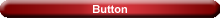
<style>
.page{position:relative;width:220px;height:18px}
.page>*{position:absolute;margin:0}
.t1{font:11px "Arial-BoldMT";color:#ffffff}
</style>
<div class="page">
<p class="t1" style="left:93px;top:5px;width:34px;height:8px">Button</p>
</div>
